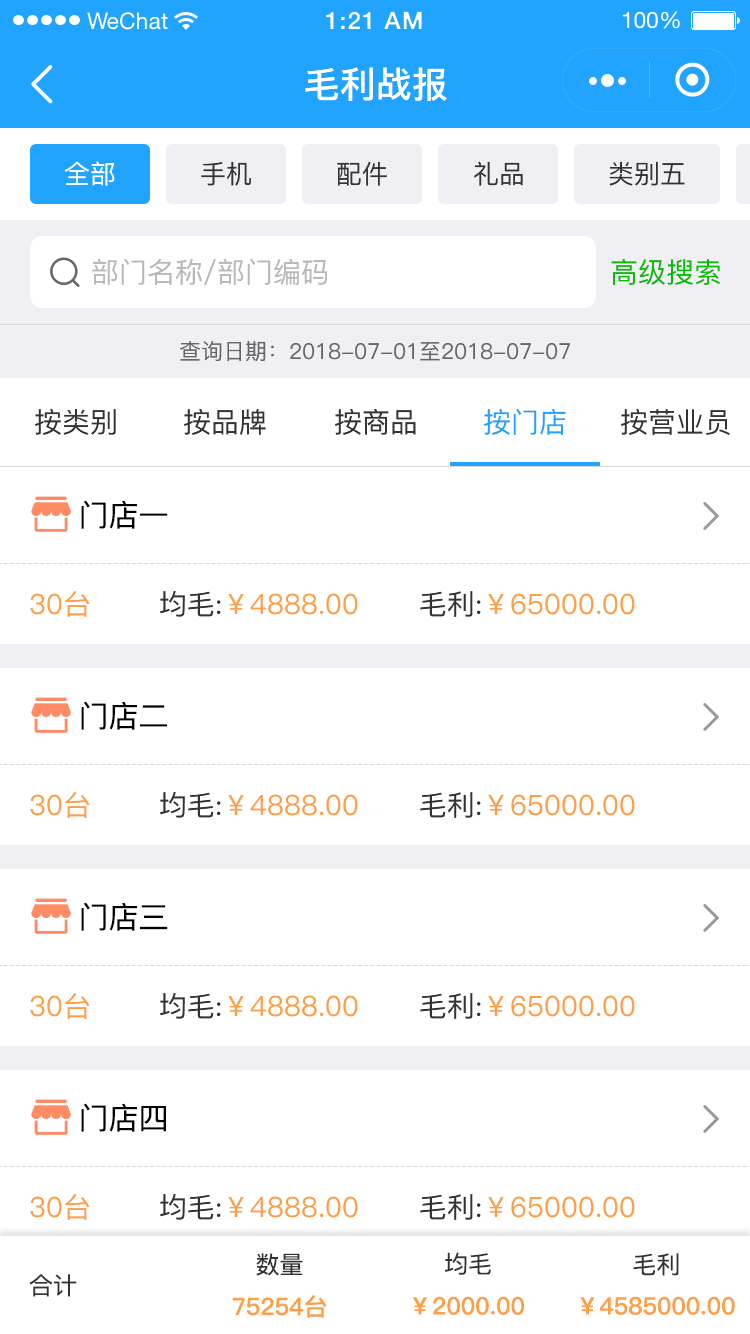
<style>
.page{position:relative;width:750px;height:1334px;background:#ffffff}
.page>*{position:absolute;margin:0}
.t1{font:36px "PingFang-SC-Bold";color:#ffffff}
.t2{font:26px "PingFang-SC-Medium";color:#ffffff}
.t3{font:26px "PingFang-SC-Medium";color:#333333}
.t4{font:28px "PingFang-SC-Medium";color:#b8b8b8}
.t5{font:28px "PingFang-SC-Medium";color:#09bb07}
.t6{font:22px "PingFang-SC-Medium";color:#666666}
.t7{font:28px "PingFang-SC-Medium";color:#333333}
.t8{font:28px "PingFang-SC-Medium";color:#21a4ff}
.t9{font:30px "PingFang-SC-Medium";color:#000000}
.t10{font:28px "PingFang-SC-Medium";color:#fe9f45}
.t11{font:24px "PingFang-SC-Medium";color:#333333}
.t12{font:24px "PingFang-SC-Bold";color:#fe9f45}
</style>
<div class="page">
<p class="t1" style="left:305px;top:67px;width:142px;height:34px">毛利战报</p>
<p class="t2" style="left:65px;top:161px;width:50px;height:25px">全部</p>
<p class="t3" style="left:201px;top:161px;width:50px;height:25px">手机</p>
<p class="t3" style="left:337px;top:161px;width:50px;height:25px">配件</p>
<p class="t3" style="left:474px;top:161px;width:49px;height:25px">礼品</p>
<p class="t3" style="left:609px;top:161px;width:76px;height:25px">类别五</p>
<p class="t4" style="left:92px;top:259px;width:235px;height:26px">部门名称/部门编码</p>
<p class="t5" style="left:611px;top:259px;width:109px;height:26px">高级搜索</p>
<p class="t6" style="left:180px;top:341px;width:390px;height:21px">查询日期：2018-07-01至2018-07-07</p>
<p class="t7" style="left:35px;top:409px;width:81px;height:26px">按类别</p>
<p class="t7" style="left:184px;top:409px;width:82px;height:26px">按品牌</p>
<p class="t7" style="left:335px;top:409px;width:81px;height:26px">按商品</p>
<p class="t8" style="left:484px;top:409px;width:82px;height:26px">按门店</p>
<p class="t7" style="left:621px;top:409px;width:109px;height:26px">按营业员</p>
<p class="t9" style="left:81px;top:500px;width:87px;height:29px">门店一</p>
<p class="t10" style="left:30px;top:591px;width:60px;height:26px">30台</p>
<p class="t10" style="left:160px;top:591px;width:198px;height:26px"><span class="t7">均毛:</span>￥4888.00</p>
<p class="t10" style="left:420px;top:591px;width:215px;height:26px"><span class="t7">毛利:</span>￥65000.00</p>
<p class="t9" style="left:81px;top:701px;width:86px;height:29px">门店二</p>
<p class="t10" style="left:30px;top:792px;width:60px;height:26px">30台</p>
<p class="t10" style="left:160px;top:792px;width:198px;height:26px"><span class="t7">均毛:</span>￥4888.00</p>
<p class="t10" style="left:420px;top:792px;width:215px;height:26px"><span class="t7">毛利:</span>￥65000.00</p>
<p class="t9" style="left:81px;top:902px;width:87px;height:29px">门店三</p>
<p class="t10" style="left:30px;top:993px;width:60px;height:26px">30台</p>
<p class="t10" style="left:160px;top:993px;width:198px;height:26px"><span class="t7">均毛:</span>￥4888.00</p>
<p class="t10" style="left:420px;top:993px;width:215px;height:26px"><span class="t7">毛利:</span>￥65000.00</p>
<p class="t9" style="left:81px;top:1103px;width:85px;height:29px">门店四</p>
<p class="t10" style="left:30px;top:1194px;width:60px;height:26px">30台</p>
<p class="t10" style="left:160px;top:1194px;width:198px;height:26px"><span class="t7">均毛:</span>￥4888.00</p>
<p class="t10" style="left:420px;top:1194px;width:215px;height:26px"><span class="t7">毛利:</span>￥65000.00</p>
<p class="t11" style="left:256px;top:1253px;width:47px;height:23px">数量</p>
<p class="t11" style="left:445px;top:1252px;width:46px;height:23px">均毛</p>
<p class="t11" style="left:633px;top:1253px;width:46px;height:23px">毛利</p>
<p class="t11" style="left:29px;top:1274px;width:48px;height:23px">合计</p>
<p class="t12" style="left:232px;top:1295px;width:95px;height:23px">75254台</p>
<p class="t12" style="left:413px;top:1296px;width:111px;height:19px">￥2000.00</p>
<p class="t12" style="left:580px;top:1296px;width:155px;height:19px">￥4585000.00</p>
</div>
